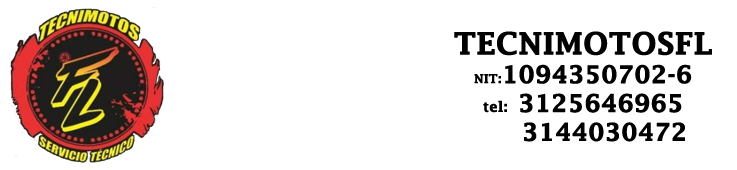
<style>
.page{position:relative;width:737px;height:170px;background:#ffffff}
.page>*{position:absolute;margin:0}
.t1{font:24px "LucidaFax-Demi";color:#000000;font-weight:bold}
.t2{font:30px "LucidaFax-Demi";color:#000000;font-weight:bold}
.t3{font:12px "LucidaFax-Demi";color:#000000;font-weight:bold}
.t4{font:14px "LucidaFax-Demi";color:#000000;font-weight:bold}
</style>
<div class="page">
<p class="t1" style="left:454px;top:31px;width:258px;height:111px;text-align:center"><span class="t2">TECNIMOTOSFL<br></span><span class="t3">NIT:</span>1094350702-6<br><span class="t4">tel:  </span>3125646965<br>     3144030472</p>
</div>
